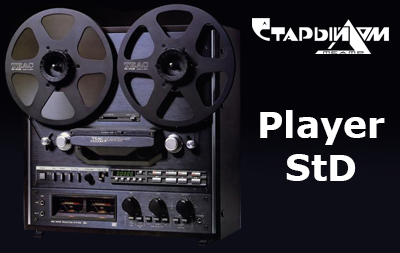
<style>
.page{position:relative;width:400px;height:253px}
.page>*{position:absolute;margin:0}
.t1{font:36px "Verdana-Bold";color:#ffffff}
</style>
<div class="page">
<p class="t1" style="left:260px;top:110px;width:125px;height:71px;text-align:center">Player<br>StD</p>
</div>
